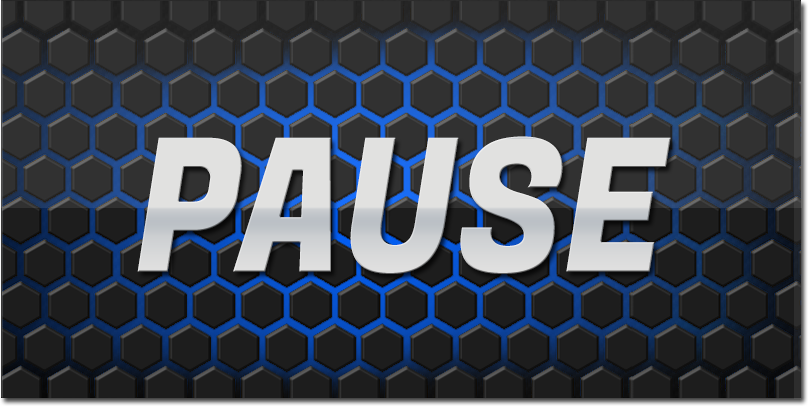
<style>
.page{position:relative;width:808px;height:406px;background:#313131}
.page>*{position:absolute;margin:0}
.t1{font:185.2px "FugazOne-Regular";color:#dfdfdf;scale:0.89 1}
</style>
<div class="page">
<p class="t1" style="left:137px;top:136px;width:534px;height:138px">PAUSE</p>
</div>
